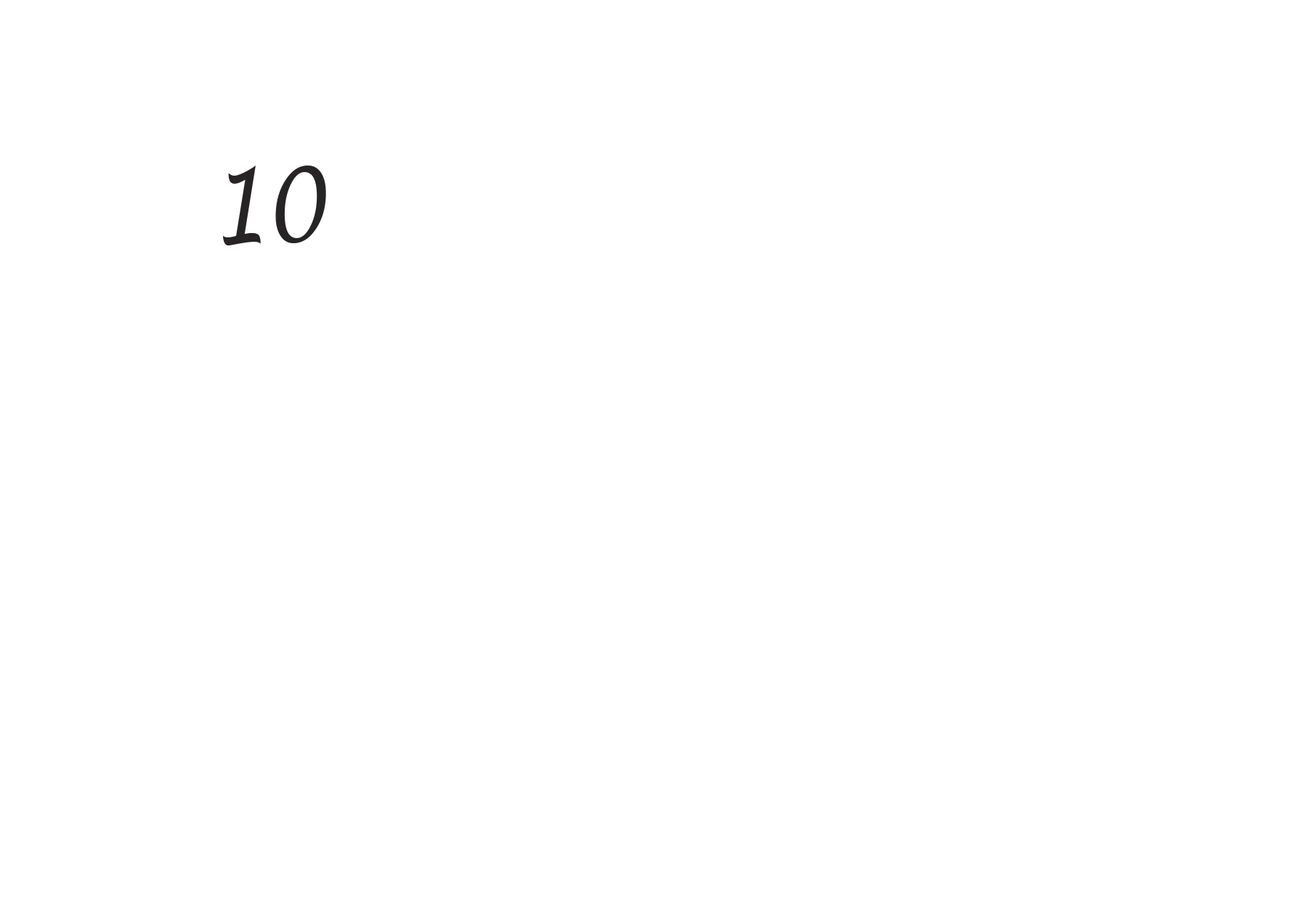
<style>
.page{position:relative;width:1293px;height:922px;background:#ffffff}
.page>*{position:absolute;margin:0}
.t1{font:102.9px "LucidaHandwriting-Italic";color:#262424;scale:0.82 1}
</style>
<div class="page">
<p class="t1" style="left:222px;top:166px;width:104px;height:79px">10</p>
</div>
